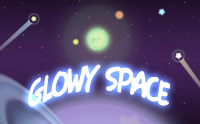
<style>
.page{position:relative;width:200px;height:124px}
.page>*{position:absolute;margin:0}
.t1{font:37.8px "FawnScript";letter-spacing:-0.05em;color:#fefefe}
</style>
<div class="page">
<p class="t1" style="left:28px;top:64px;width:142px;height:43px">GLOWY SPACE</p>
</div>
